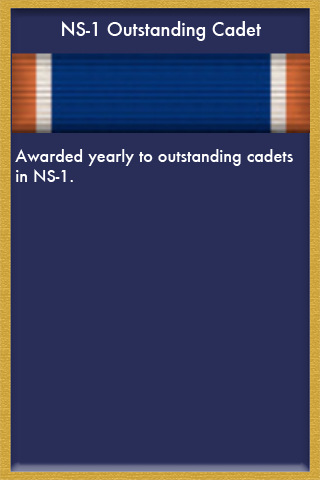
<style>
.page{position:relative;width:320px;height:480px;background:#292e59}
.page>*{position:absolute;margin:0}
.t1{font:18px "Futura-Medium";color:#ffffff}
.t2{font:16px "Futura-Medium";color:#ffffff}
</style>
<div class="page">
<p class="t1" style="left:62px;top:21px;width:199px;height:20px">NS-1 Outstanding Cadet</p>
<p class="t2" style="left:15px;top:149px;width:278px;height:33px">Awarded yearly to outstanding cadets <br>in NS-1.</p>
</div>
